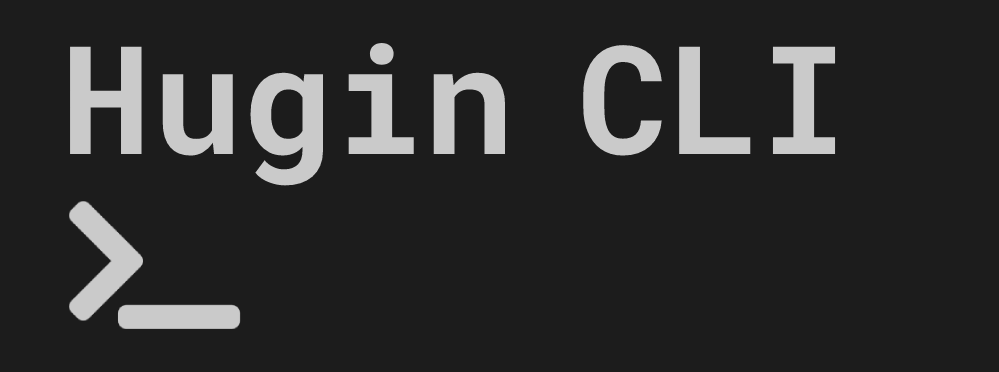
<style>
.page{position:relative;width:999px;height:372px;background:#1c1c1c}
.page>*{position:absolute;margin:0}
.t1{font:151px "RobotoMono-Bold";color:#cacaca}
</style>
<div class="page">
<p class="t1" style="left:70px;top:43px;width:766px;height:143px">Hugin CLI</p>
</div>
